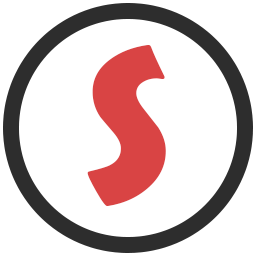
<style>
.page{position:relative;width:256px;height:256px;background:#ffffff}
.page>*{position:absolute;margin:0}
.t1{font:219px "BerlinSansFBDemi-Bold";color:#d94444}
</style>
<div class="page">
<p class="t1" style="left:87px;top:45px;width:79px;height:161px">S</p>
</div>
